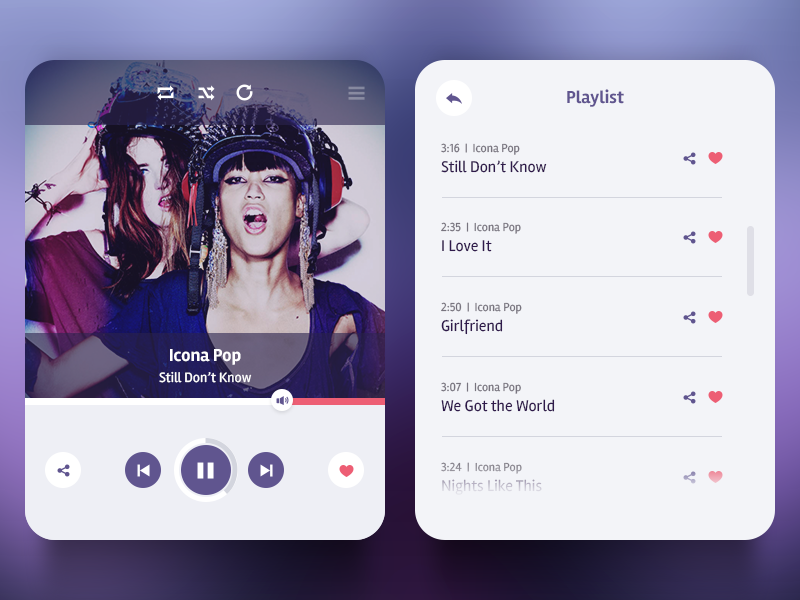
<style>
.page{position:relative;width:800px;height:600px;background:#f3f4f8}
.page>*{position:absolute;margin:0}
.t1{font:18px "Rambla-Bold";color:#60558f}
.t2{font:12px "Rambla-Regular";color:#78747f}
.t3{font:16px "Rambla-Regular";color:#2f1a4b}
.t4{font:18px "Rambla-Bold";color:#ffffff}
.t5{font:14px "Rambla-Regular";color:#ffffff}
.t6{font:12px "Rambla-Regular";color:#8f8c96}
.t7{font:16px "Rambla-Regular";color:#c8c4d2}
</style>
<div class="page">
<p class="t1" style="left:567px;top:89px;width:57px;height:18px">Playlist</p>
<p class="t2" style="left:441px;top:143px;width:79px;height:12px">3:16  |  Icona Pop</p>
<p class="t3" style="left:441px;top:160px;width:106px;height:13px">Still Don’t Know</p>
<p class="t2" style="left:441px;top:222px;width:80px;height:12px">2:35  |  Icona Pop</p>
<p class="t3" style="left:442px;top:240px;width:50px;height:12px">I Love It</p>
<p class="t2" style="left:441px;top:302px;width:81px;height:12px">2:50  |  Icona Pop</p>
<p class="t3" style="left:441px;top:319px;width:62px;height:16px">Girlfriend</p>
<p class="t4" style="left:170px;top:349px;width:71px;height:16px">Icona Pop</p>
<p class="t5" style="left:159px;top:371px;width:93px;height:12px">Still Don’t Know</p>
<p class="t2" style="left:441px;top:382px;width:80px;height:12px">3:07  |  Icona Pop</p>
<p class="t3" style="left:441px;top:399px;width:114px;height:13px">We Got the World</p>
<p class="t6" style="left:441px;top:462px;width:81px;height:12px">3:24  |  Icona Pop</p>
<p class="t7" style="left:442px;top:479px;width:100px;height:16px">Nights Like This</p>
</div>
